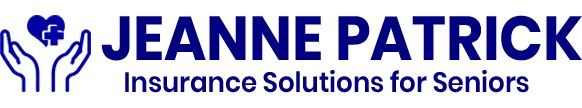
<style>
.page{position:relative;width:582px;height:108px;background:#ffffff}
.page>*{position:absolute;margin:0}
.t1{font:62px "Poppins-Bold";color:#000080;scale:0.93 1}
.t2{font:28px "Poppins-SemiBold";color:#000080;scale:0.93 1}
</style>
<div class="page">
<p class="t1" style="left:101px;top:15px;width:481px;height:46px">JEANNE PATRICK</p>
<p class="t2" style="left:125px;top:70px;width:404px;height:23px">Insurance Solutions for Seniors</p>
</div>
